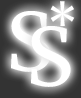
<style>
.page{position:relative;width:81px;height:98px}
.page>*{position:absolute;margin:0}
.t1{font:48px "Merriweather-Regular";color:#ffffff}
.t2{font:80px "Merriweather-Regular";color:#ffffff}
</style>
<div class="page">
<p class="t1" style="left:50px;top:1px;width:25px;height:25px">*</p>
<p class="t2" style="left:11px;top:11px;width:40px;height:61px">S</p>
<p class="t2" style="left:31px;top:26px;width:40px;height:61px">S</p>
</div>
